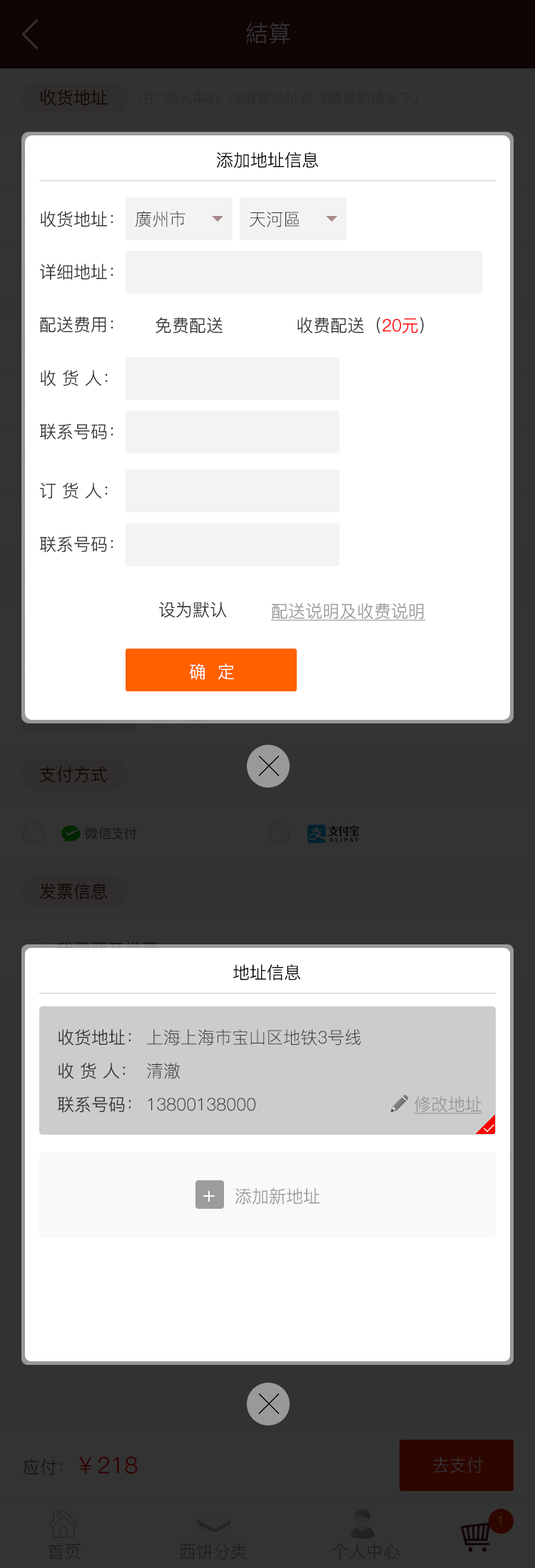
<style>
.page{position:relative;width:535px;height:1568px;background:#ffffff}
.page>*{position:absolute;margin:0}
.t1{font:17.1px "PingFang-SC-Regular";color:#000000}
.t2{font:17.1px "PingFang-SC-Regular";color:#333333}
.t3{font:17.1px "PingFang-SC-Light";color:#333333}
.t4{font:17.1px "PingFang-SC-Regular";color:#ff0000}
.t5{font:17.1px "PingFang-SC-Regular";color:#999999;text-decoration:underline}
.t6{font:17.1px "PingFang-SC-Regular";color:#ffffff}
.t7{font:21.4px "PingFang-SC-Regular";color:#ffffff}
.t8{font:17.1px "PingFang-SC-Regular";color:#9c9c9c}
</style>
<div class="page">
<p class="t1" style="left:217px;top:152px;width:101px;height:16px">添加地址信息</p>
<p class="t2" style="left:41px;top:211px;width:72px;height:16px">收货地址：</p>
<p class="t3" style="left:135px;top:211px;width:50px;height:16px">廣州市</p>
<p class="t3" style="left:249px;top:212px;width:50px;height:15px">天河區</p>
<p class="t2" style="left:40px;top:264px;width:73px;height:16px">详细地址：</p>
<p class="t2" style="left:40px;top:316px;width:73px;height:17px">配送费用：</p>
<p class="t2" style="left:155px;top:317px;width:67px;height:17px">免费配送</p>
<p class="t2" style="left:297px;top:317px;width:126px;height:17px">收费配送（<span class="t4">20元</span>）</p>
<p class="t2" style="left:41px;top:370px;width:67px;height:16px">收 货 人：</p>
<p class="t2" style="left:40px;top:423px;width:73px;height:17px">联系号码：</p>
<p class="t2" style="left:40px;top:483px;width:68px;height:16px">订 货 人：</p>
<p class="t2" style="left:40px;top:536px;width:73px;height:16px">联系号码：</p>
<p class="t2" style="left:159px;top:602px;width:68px;height:16px">设为默认</p>
<p class="t5" style="left:271px;top:603px;width:154px;height:18px">配送说明及收费说明</p>
<p class="t6" style="left:190px;top:664px;width:44px;height:16px">确  定</p>
<p class="t1" style="left:233px;top:964px;width:67px;height:17px">地址信息</p>
<p class="t2" style="left:58px;top:1029px;width:73px;height:17px">收货地址：</p>
<p class="t3" style="left:147px;top:1029px;width:214px;height:17px">上海上海市宝山区地铁3号线</p>
<p class="t2" style="left:58px;top:1063px;width:67px;height:16px">收 货 人：</p>
<p class="t3" style="left:147px;top:1063px;width:33px;height:16px">清澈</p>
<p class="t2" style="left:58px;top:1096px;width:73px;height:17px">联系号码：</p>
<p class="t3" style="left:148px;top:1098px;width:107px;height:13px">13800138000</p>
<p class="t5" style="left:413px;top:1096px;width:70px;height:18px">修改地址</p>
<p class="t7" style="left:203px;top:1191px;width:12px;height:11px">+</p>
<p class="t8" style="left:235px;top:1188px;width:84px;height:17px">添加新地址</p>
</div>
